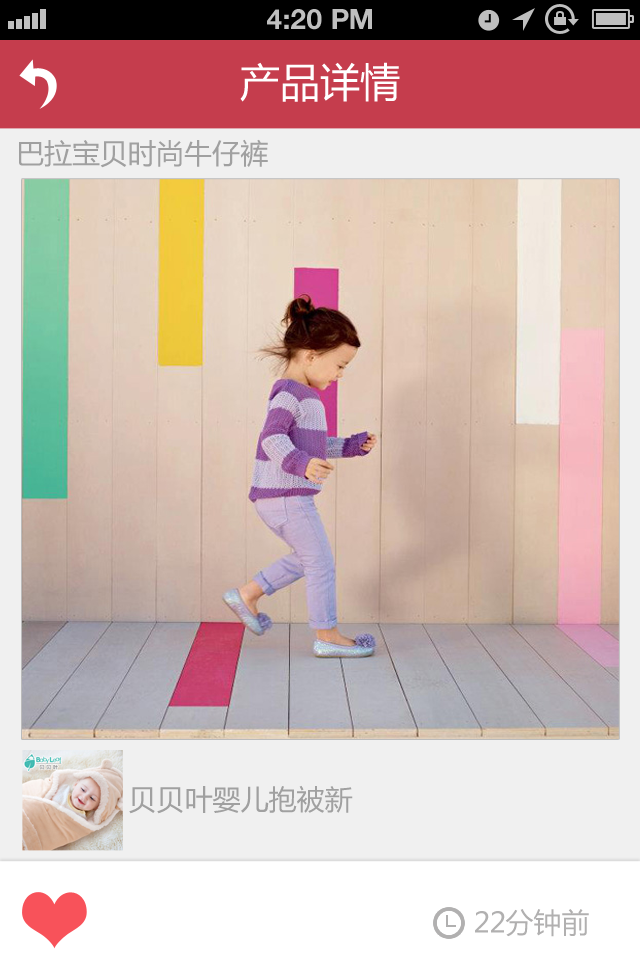
<style>
.page{position:relative;width:640px;height:960px}
.page>*{position:absolute;margin:0}
.t1{font:28px "HelveticaNeue-Bold";color:#bfbfbf;text-transform:uppercase}
.t2{font:40px "MicrosoftYaHei";color:#ffffff;text-transform:uppercase}
.t3{font:28px "MicrosoftYaHei";color:#a0a0a0;text-transform:uppercase}
.t4{font:28px "MicrosoftYaHei";color:#b1b0b0;text-transform:uppercase}
</style>
<div class="page">
<p class="t1" style="left:267px;top:9px;width:105px;height:21px">4:20 PM</p>
<p class="t2" style="left:240px;top:62px;width:160px;height:40px">产品详情</p>
<p class="t3" style="left:19px;top:139px;width:249px;height:29px">巴拉宝贝时尚牛仔裤</p>
<p class="t3" style="left:129px;top:785px;width:224px;height:29px">贝贝叶婴儿抱被新</p>
<p class="t4" style="left:475px;top:909px;width:114px;height:28px">22分钟前</p>
</div>
